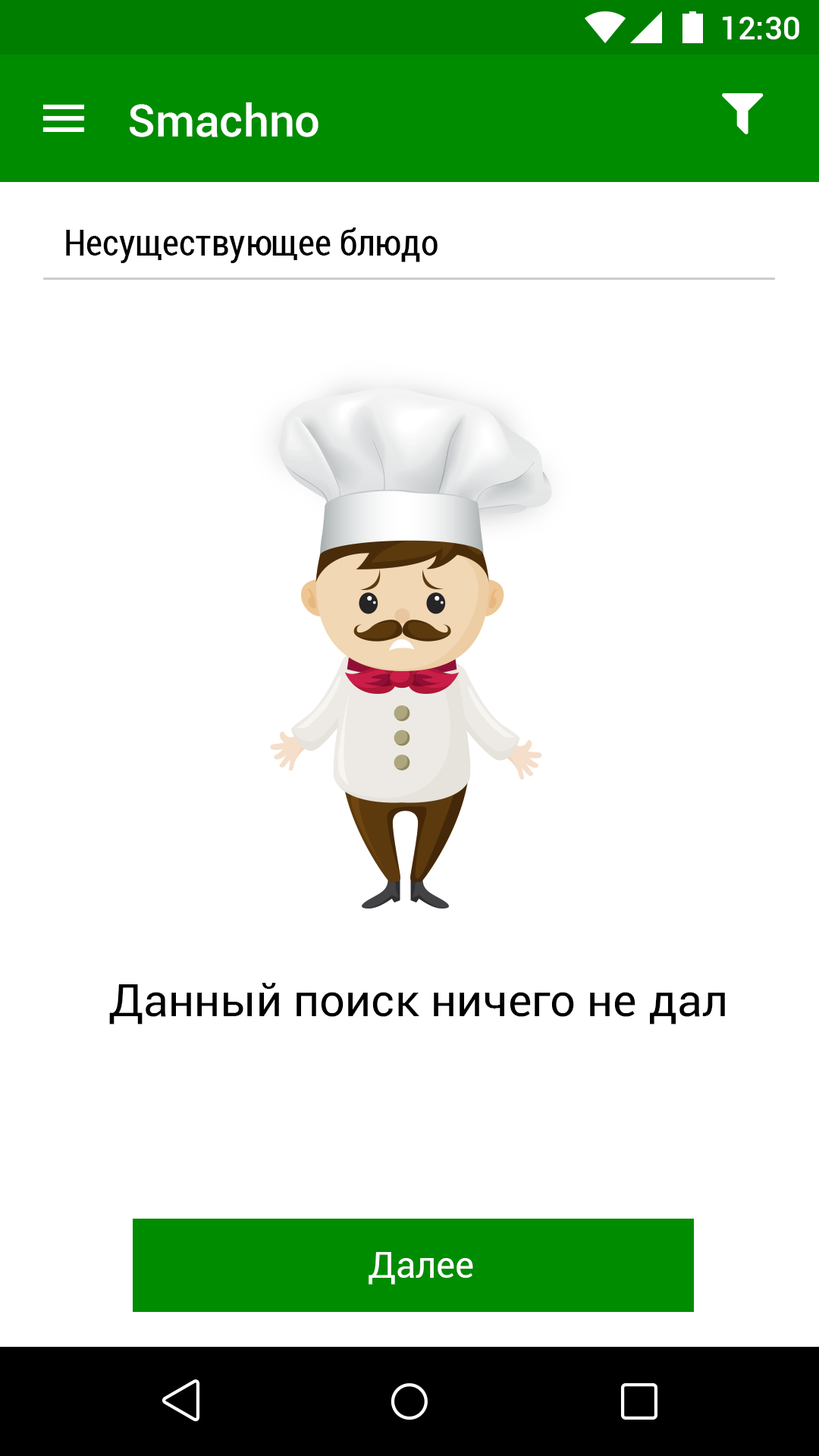
<style>
.page{position:relative;width:819px;height:1456px;background:#ffffff}
.page>*{position:absolute;margin:0}
.t1{font:31.9px "Roboto-Medium";color:#ffffff}
.t2{font:45.5px "Roboto-Medium";color:#ffffff}
.t3{font:36.4px "Roboto-Condensed";color:#000000}
.t4{font:45.5px "Roboto-Regular";color:#000000}
.t5{font:36.4px "Roboto-Regular";color:#ffffff}
</style>
<div class="page">
<p class="t1" style="left:723px;top:16px;width:76px;height:23px">12:30</p>
<p class="t2" style="left:130px;top:102px;width:188px;height:35px">Smachno</p>
<p class="t3" style="left:66px;top:227px;width:372px;height:36px">Несуществующее блюдо</p>
<p class="t4" style="left:109px;top:983px;width:616px;height:41px">Данный поиск ничего не дал</p>
<p class="t5" style="left:369px;top:1252px;width:104px;height:33px">Далее</p>
</div>
